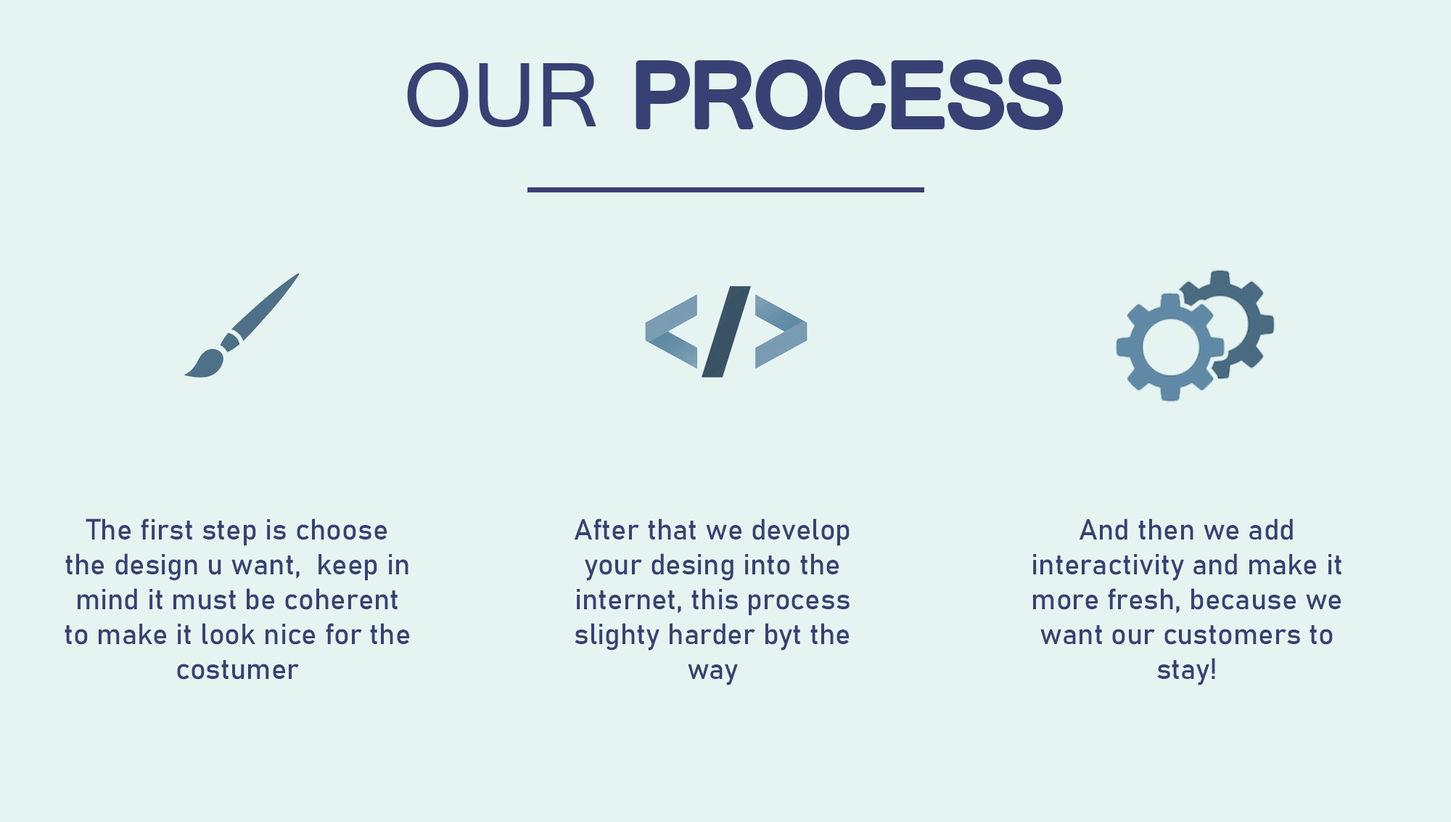
<style>
.page{position:relative;width:1451px;height:822px;background:#e6f4f1}
.page>*{position:absolute;margin:0}
.t1{font:29px "Bahnschrift";color:#384173}
</style>
<div class="page">
<p class="t1" style="left:65px;top:518px;width:345px;height:161px;text-align:center">The first step is choose the design u want,  keep in mind it must be coherent to make it look nice for the costumer</p>
<p class="t1" style="left:574px;top:518px;width:276px;height:167px;text-align:center">After that we develop your desing into the internet, this process slighty harder byt the way</p>
<p class="t1" style="left:1033px;top:518px;width:309px;height:167px;text-align:center">And then we add interactivity and make it more fresh, because we want our customers to stay!</p>
</div>
